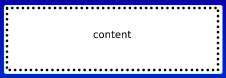
<style>
.page{position:relative;width:226px;height:78px;background:#ffffff}
.page>*{position:absolute;margin:0}
.t1{font:10px "DejaVuSans";color:#000000}
</style>
<div class="page">
<p class="t1" style="left:93px;top:30px;width:39px;height:9px">content</p>
</div>
